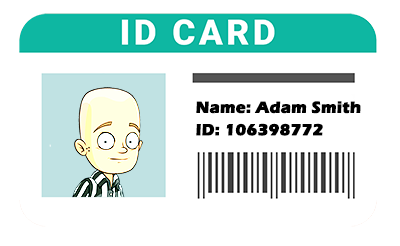
<style>
.page{position:relative;width:400px;height:246px;background:#ffffff}
.page>*{position:absolute;margin:0}
.t1{font:16.4px "ErasITC-Bold";color:#000000;font-weight:bold}
.t2{font:16.2px "ErasITC-Bold";color:#000000;font-weight:bold}
</style>
<div class="page">
<p class="t1" style="left:196px;top:101px;width:165px;height:13px">Name: Adam Smith</p>
<p class="t2" style="left:196px;top:123px;width:127px;height:13px">ID: 106398772</p>
</div>
